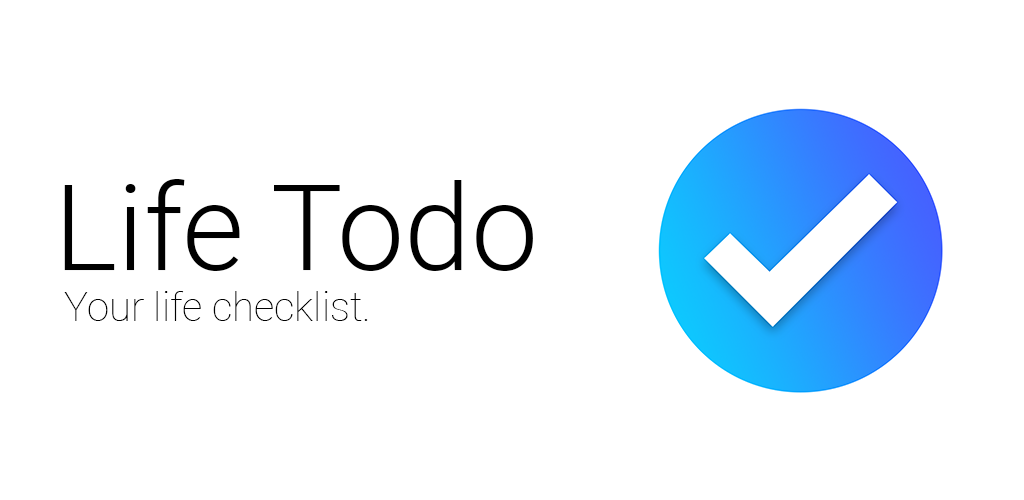
<style>
.page{position:relative;width:1024px;height:500px;background:#ffffff}
.page>*{position:absolute;margin:0}
.t1{font:120px "Roboto-Light";color:#000000}
.t2{font:40px "Roboto-Thin";color:#000000}
</style>
<div class="page">
<p class="t1" style="left:64px;top:179px;width:469px;height:92px">Life Todo</p>
<p class="t2" style="left:64px;top:291px;width:304px;height:30px">Your life checklist.</p>
</div>
